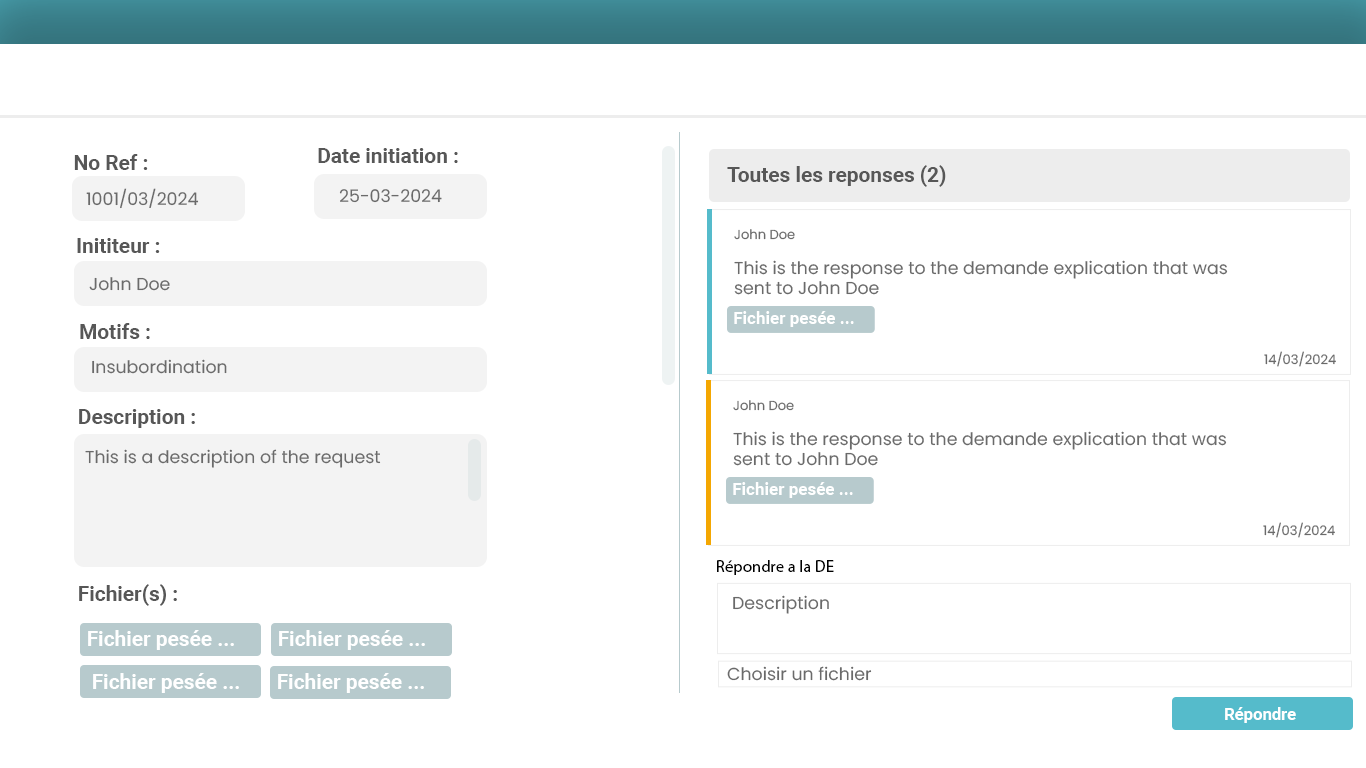
<style>
.page{position:relative;width:1366px;height:768px;background:#ffffff}
.page>*{position:absolute;margin:0}
.t1{font:20.8px "Roboto-Bold";color:#575757}
.t2{font:17.4px "Poppins-Regular";color:#6a6a6a}
.t3{font:13.1px "Poppins-Regular";color:#6a6a6a}
.t4{font:17px "Roboto-Bold";color:#ffffff}
.t5{font:16.7px "MyriadPro-Regular";color:#000000}
.t6{font:20.8px "Roboto-Bold";color:#ffffff}
.t7{font:16.7px "Roboto-Bold";color:#ffffff}
</style>
<div class="page">
<p class="t1" style="left:318px;top:148px;width:140px;height:15px">Date initiation :</p>
<p class="t1" style="left:74px;top:154px;width:74px;height:16px">No Ref :</p>
<p class="t1" style="left:727px;top:165px;width:219px;height:22px">Toutes les reponses (2)</p>
<p class="t2" style="left:86px;top:188px;width:113px;height:21px">1001/03/2024</p>
<p class="t2" style="left:339px;top:189px;width:103px;height:14px">25-03-2024</p>
<p class="t3" style="left:734px;top:229px;width:61px;height:11px">John Doe</p>
<p class="t1" style="left:77px;top:238px;width:83px;height:15px">Inititeur :</p>
<p class="t2" style="left:734px;top:260px;width:494px;height:35px">This is the response to the demande explication that was<br>sent to John Doe</p>
<p class="t2" style="left:89px;top:277px;width:81px;height:14px">John Doe</p>
<p class="t4" style="left:734px;top:311px;width:120px;height:16px">Fichier pesée ...</p>
<p class="t1" style="left:80px;top:323px;width:70px;height:16px">Motifs :</p>
<p class="t3" style="left:1264px;top:351px;width:72px;height:16px">14/03/2024</p>
<p class="t2" style="left:92px;top:359px;width:135px;height:15px">Insubordination</p>
<p class="t3" style="left:733px;top:400px;width:61px;height:11px">John Doe</p>
<p class="t1" style="left:79px;top:409px;width:116px;height:19px">Description :</p>
<p class="t2" style="left:733px;top:431px;width:494px;height:35px">This is the response to the demande explication that was<br>sent to John Doe</p>
<p class="t2" style="left:85px;top:449px;width:296px;height:19px">This is a description of the request</p>
<p class="t4" style="left:733px;top:482px;width:120px;height:16px">Fichier pesée ...</p>
<p class="t3" style="left:1263px;top:522px;width:72px;height:16px">14/03/2024</p>
<p class="t5" style="left:717px;top:560px;width:117px;height:15px">Répondre a la DE</p>
<p class="t1" style="left:79px;top:584px;width:98px;height:22px">Fichier(s) :</p>
<p class="t2" style="left:733px;top:595px;width:96px;height:19px">Description</p>
<p class="t6" style="left:88px;top:630px;width:146px;height:20px">Fichier pesée ...</p>
<p class="t6" style="left:279px;top:630px;width:146px;height:20px">Fichier pesée ...</p>
<p class="t6" style="left:93px;top:673px;width:146px;height:20px">Fichier pesée ...</p>
<p class="t6" style="left:278px;top:673px;width:146px;height:20px">Fichier pesée ...</p>
<p class="t2" style="left:727px;top:666px;width:145px;height:15px">Choisir un fichier</p>
<p class="t7" style="left:1225px;top:707px;width:71px;height:16px">Répondre</p>
</div>
